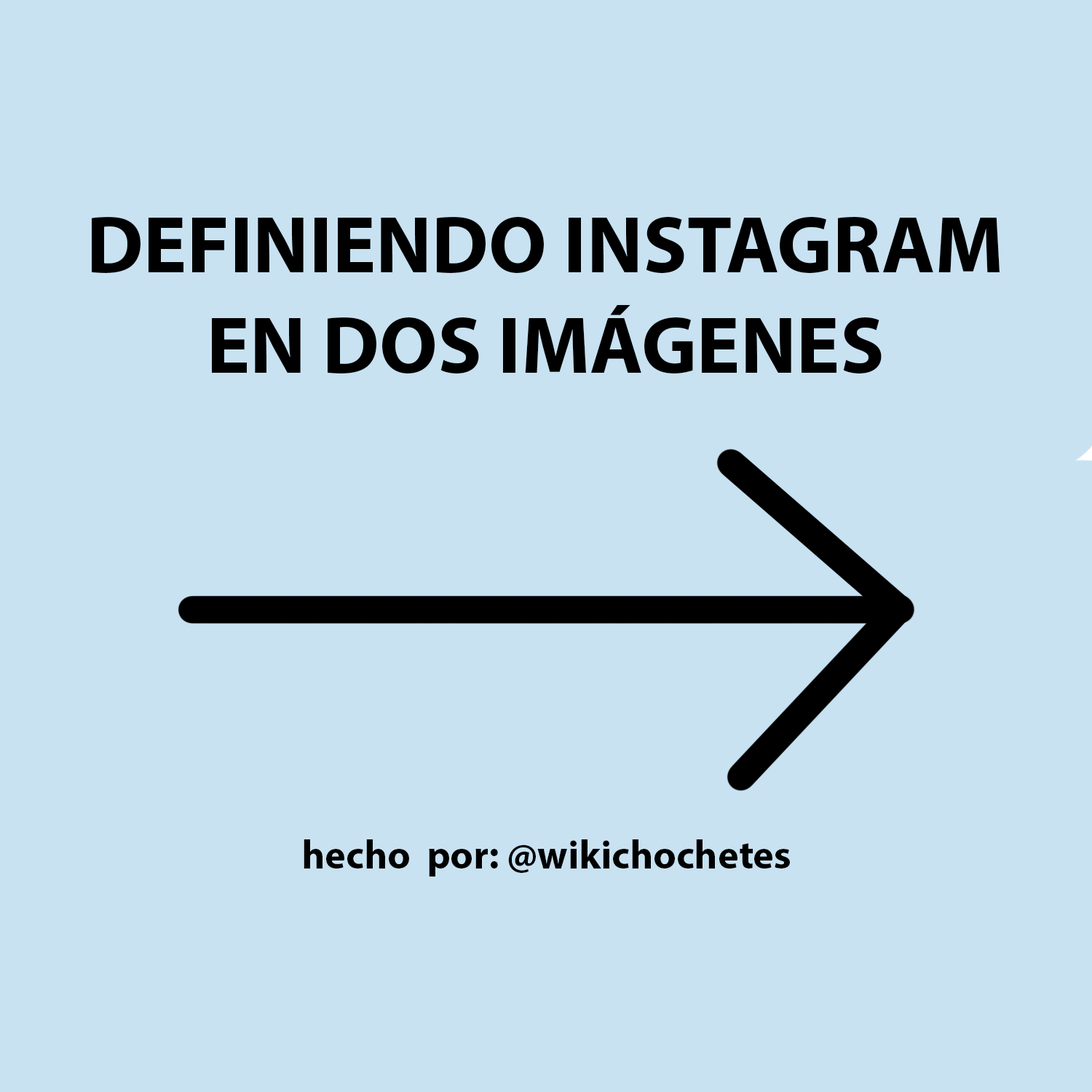
<style>
.page{position:relative;width:1092px;height:1092px;background:#c8e2f2}
.page>*{position:absolute;margin:0}
.t1{font:81.4px "MyriadPro-Bold";color:#000000}
.t2{font:39.9px "MyriadPro-Bold";color:#000000}
</style>
<div class="page">
<p class="t1" style="left:92px;top:217px;width:908px;height:156px;text-align:center">DEFINIENDO INSTAGRAM<br>EN DOS IMÁGENES</p>
<p class="t2" style="left:304px;top:839px;width:486px;height:38px">hecho  por: @wikichochetes</p>
</div>
